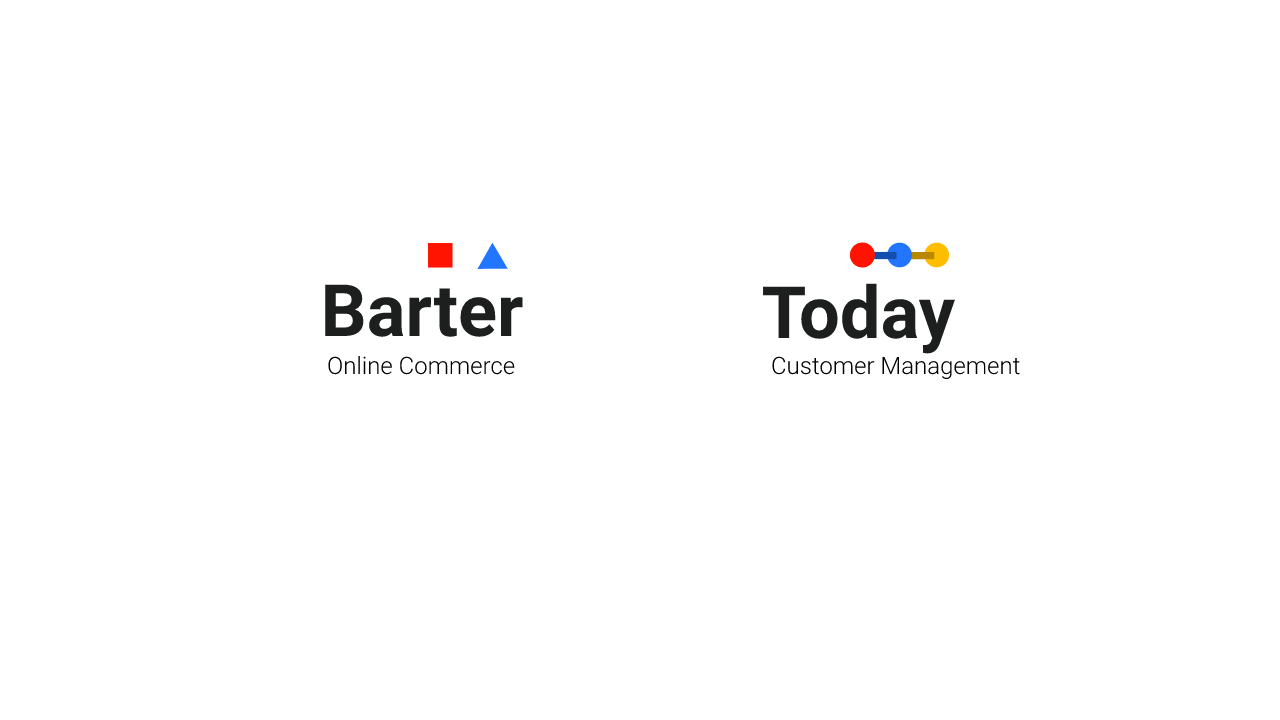
<style>
.page{position:relative;width:1280px;height:720px;background:#ffffff}
.page>*{position:absolute;margin:0}
.t1{font:72.2px "Roboto-Bold";color:#1d1f1f}
.t2{font:24px "Roboto-Light";color:#000000}
</style>
<div class="page">
<p class="t1" style="left:325px;top:284px;width:198px;height:53px">Barter</p>
<p class="t1" style="left:763px;top:283px;width:192px;height:71px">Today</p>
<p class="t2" style="left:328px;top:356px;width:187px;height:19px">Online Commerce</p>
<p class="t2" style="left:772px;top:356px;width:248px;height:24px">Customer Management</p>
</div>
